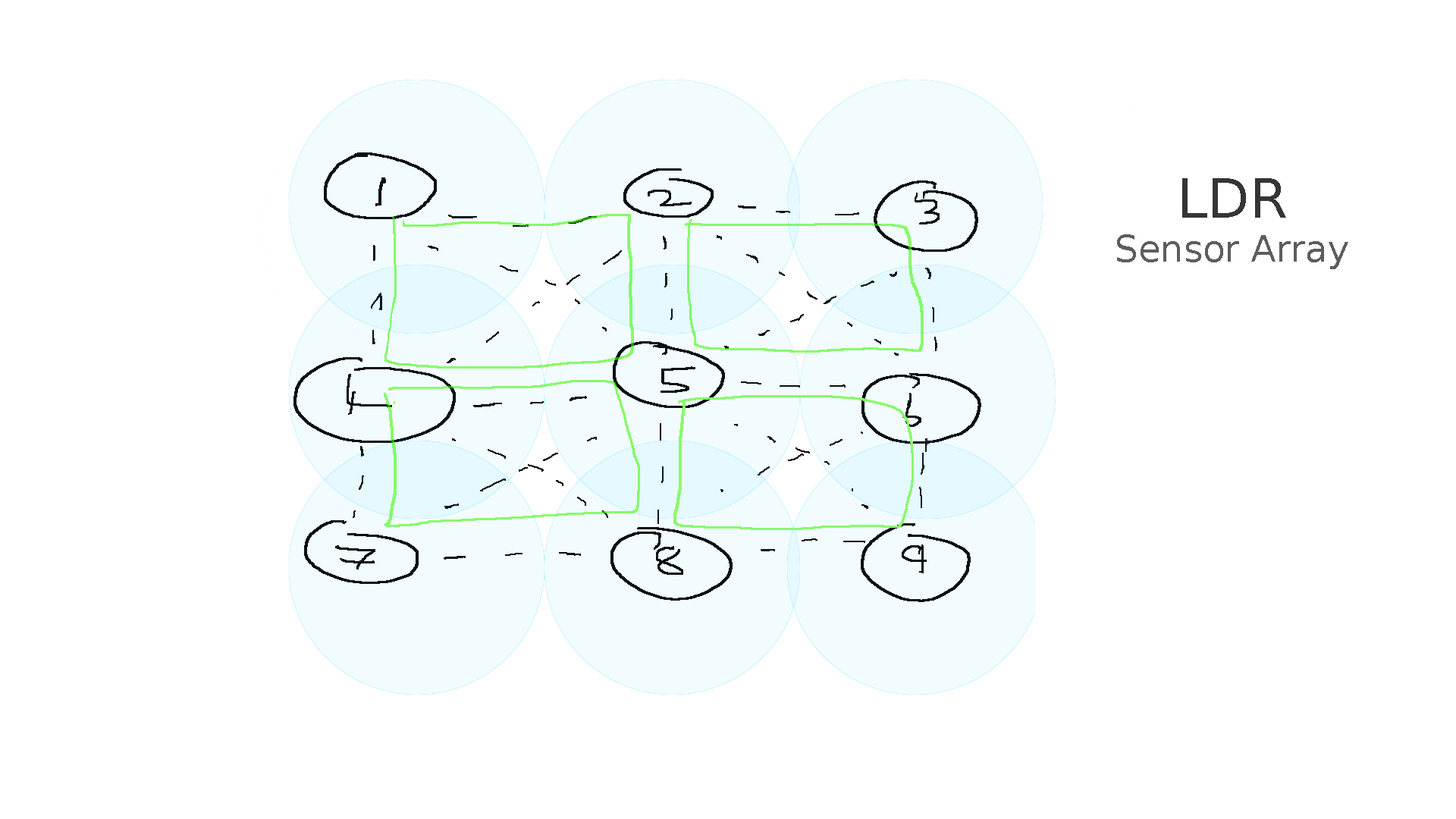
<style>
.page{position:relative;width:1456px;height:819px;background:#ffffff}
.page>*{position:absolute;margin:0}
.t1{font:36.4px "BitstreamVeraSans-Roman";color:#5d5d5d}
.t2{font:54.6px "BitstreamVeraSans-Roman";color:#353535}
</style>
<div class="page">
<p class="t1" style="left:1117px;top:178px;width:231px;height:91px;text-align:center"><span class="t2">LDR <br></span>Sensor Array</p>
</div>
